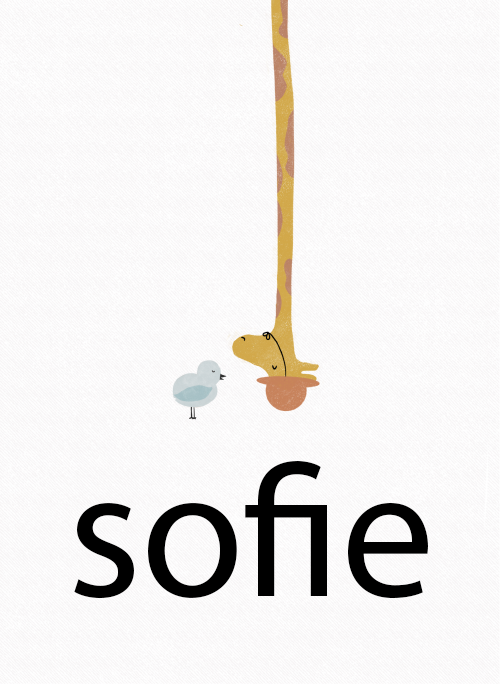
<style>
.page{position:relative;width:500px;height:684px}
.page>*{position:absolute;margin:0}
.t1{font:187px "MyriadPro-Regular";color:#000000}
</style>
<div class="page">
<p class="t1" style="left:74px;top:461px;width:354px;height:138px">sofie</p>
</div>
